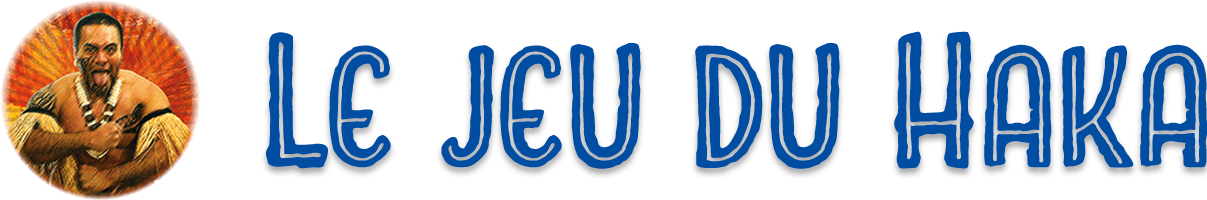
<style>
.page{position:relative;width:1207px;height:200px;background:#ffffff}
.page>*{position:absolute;margin:0}
.t1{font:176.5px "CharcuterieSansInline";color:#014da2}
</style>
<div class="page">
<p class="t1" style="left:266px;top:31px;width:942px;height:138px">Le jeu du Haka</p>
</div>
